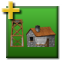
<style>
.page{position:relative;width:64px;height:64px;background:#ffffff}
.page>*{position:absolute;margin:0}
.t1{font:36px "Arial-BoldMT"}
</style>
<div class="page">
<p class="t1" style="left:1px;top:1px;width:19px;height:18px">+</p>
</div>
